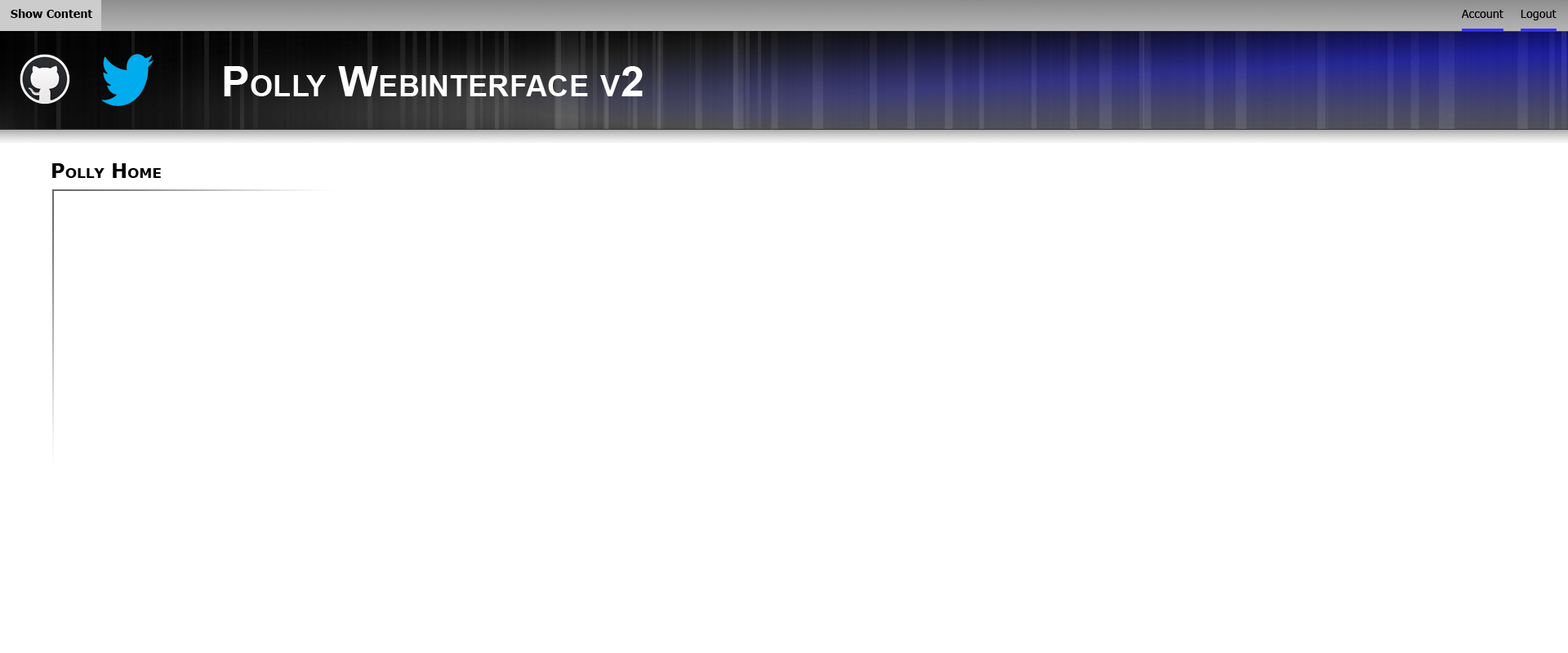
<style>
.page{position:relative;width:1568px;height:653px;background:#ffffff}
.page>*{position:absolute;margin:0}
.t1{font:11.4px "Verdana-Bold";color:#000000;scale:0.91 1}
.t2{font:11.4px "Verdana";color:#000000;scale:0.91 1}
.t3{font:42.6px "Arial-BoldMT";color:#ffffff;font-variant:small-caps}
.t4{font:19.6px "Verdana-Bold";color:#000000;font-variant:small-caps}
</style>
<div class="page">
<p class="t1" style="left:11px;top:9px;width:81px;height:9px">Show Content</p>
<p class="t2" style="left:1461px;top:10px;width:42px;height:8px">Account</p>
<p class="t2" style="left:1521px;top:10px;width:36px;height:10px">Logout</p>
<p class="t3" style="left:224px;top:66px;width:419px;height:30px">Polly Webinterface v2</p>
<p class="t4" style="left:52px;top:163px;width:109px;height:15px">Polly Home</p>
</div>
